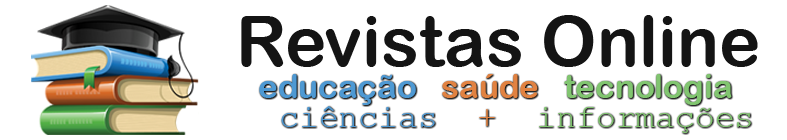
<style>
.page{position:relative;width:787px;height:140px;background:#ffffff}
.page>*{position:absolute;margin:0}
.t1{font:70px "ArialRoundedMTBold";color:#141414}
.t2{font:33px "ArialRoundedMTBold";color:#81c570}
.t3{font:33px "ArialRoundedMTBold";color:#4e99d3}
.t4{font:33px "ArialRoundedMTBold";color:#e18241}
.t5{font:33px "CourierNewPSMT";color:#81c570}
.t6{font:33px "CourierNewPSMT";color:#4e99d3}
.t7{font:33px "CourierNewPSMT";color:#e18241}
</style>
<div class="page">
<p class="t1" style="left:241px;top:15px;width:517px;height:52px">Revistas Online</p>
<p class="t2" style="left:259px;top:74px;width:473px;height:31px"><span class="t3">educação   </span><span class="t4">saúde   </span>tecnologia</p>
<p class="t5" style="left:281px;top:106px;width:470px;height:27px"><span class="t6">ciências  </span><span class="t7">+  </span>informações</p>
</div>
